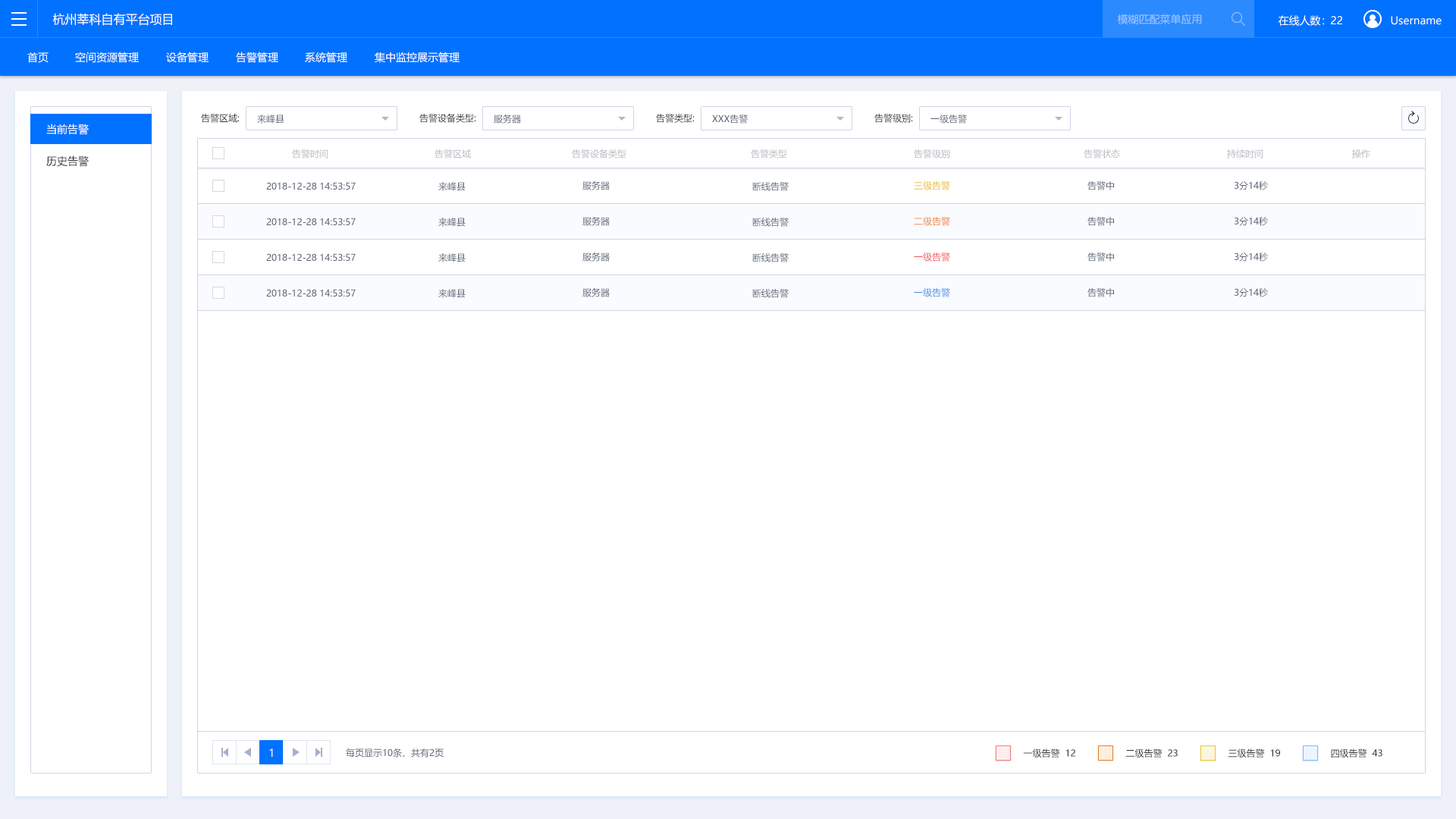
<style>
.page{position:relative;width:1456px;height:819px;background:#ffffff}
.page>*{position:absolute;margin:0}
.t1{font:12.1px "MicrosoftYaHei";color:#ffffff}
.t2{font:10.6px "MicrosoftYaHei";color:#9cc8ff}
.t3{font:10.6px "MicrosoftYaHei";color:#ffffff}
.t4{font:9.1px "MicrosoftYaHei";color:#333333}
.t5{font:9.1px "MicrosoftYaHei";color:#596477}
.t6{font:9.1px "MicrosoftYaHei"}
.t7{font:9.1px "MicrosoftYaHei";color:#b8bbc2}
.t8{font:10.6px "MicrosoftYaHei";color:#333333}
.t9{font:9.1px "MicrosoftYaHei";color:#efbb20}
.t10{font:9.1px "MicrosoftYaHei";color:#ec842f}
.t11{font:9.1px "MicrosoftYaHei";color:#f35151}
.t12{font:9.1px "MicrosoftYaHei";color:#3b8eeb}
.t13{font:10.6px "MicrosoftYaHei";color:#fefeff}
</style>
<div class="page">
<p class="t1" style="left:52px;top:13px;width:120px;height:13px">杭州莘科自有平台项目</p>
<p class="t2" style="left:1117px;top:14px;width:85px;height:11px">模糊匹配菜单应用</p>
<p class="t3" style="left:1278px;top:15px;width:46px;height:11px">在线人数：</p>
<p class="t3" style="left:1331px;top:16px;width:11px;height:8px">22</p>
<p class="t3" style="left:1391px;top:16px;width:51px;height:9px">Username</p>
<p class="t3" style="left:27px;top:52px;width:22px;height:11px">首页</p>
<p class="t3" style="left:75px;top:52px;width:64px;height:11px">空间资源管理</p>
<p class="t3" style="left:166px;top:52px;width:43px;height:11px">设备管理</p>
<p class="t3" style="left:236px;top:52px;width:42px;height:11px">告警管理</p>
<p class="t3" style="left:305px;top:52px;width:42px;height:11px">系统管理</p>
<p class="t3" style="left:375px;top:52px;width:85px;height:11px">集中监控展示管理</p>
<p class="t4" style="left:201px;top:114px;width:39px;height:9px">告警区域:</p>
<p class="t4" style="left:419px;top:113px;width:57px;height:10px">告警设备类型:</p>
<p class="t5" style="left:494px;top:114px;width:27px;height:10px">服务器</p>
<p class="t4" style="left:656px;top:114px;width:39px;height:9px">告警类型:</p>
<p class="t4" style="left:874px;top:114px;width:39px;height:9px">告警级别:</p>
<p class="t3" style="left:46px;top:124px;width:43px;height:11px">当前告警</p>
<p class="t5" style="left:257px;top:115px;width:27px;height:9px">来峰县</p>
<p class="t5" style="left:712px;top:115px;width:36px;height:9px">XXX告警</p>
<p class="t5" style="left:930px;top:115px;width:37px;height:9px">一级告警</p>
<p class="t6" style="left:292px;top:149px;width:36px;height:9px">告警时间</p>
<p class="t7" style="left:435px;top:149px;width:36px;height:9px">告警区域</p>
<p class="t7" style="left:572px;top:149px;width:54px;height:9px">告警设备类型</p>
<p class="t7" style="left:751px;top:149px;width:36px;height:9px">告警类型</p>
<p class="t7" style="left:914px;top:149px;width:36px;height:9px">告警级别</p>
<p class="t7" style="left:1084px;top:149px;width:36px;height:9px">告警状态</p>
<p class="t7" style="left:1227px;top:149px;width:36px;height:9px">持续时间</p>
<p class="t7" style="left:1352px;top:149px;width:18px;height:9px">操作</p>
<p class="t8" style="left:46px;top:155px;width:43px;height:12px">历史告警</p>
<p class="t5" style="left:266px;top:182px;width:90px;height:8px">2018-12-28 14:53:57</p>
<p class="t5" style="left:438px;top:182px;width:28px;height:9px">来峰县</p>
<p class="t5" style="left:582px;top:180px;width:28px;height:10px">服务器</p>
<p class="t5" style="left:752px;top:181px;width:37px;height:10px">断线告警</p>
<p class="t9" style="left:914px;top:181px;width:36px;height:9px">三级告警</p>
<p class="t5" style="left:1087px;top:181px;width:27px;height:9px">告警中</p>
<p class="t5" style="left:1234px;top:180px;width:34px;height:10px">3分14秒</p>
<p class="t5" style="left:266px;top:218px;width:90px;height:7px">2018-12-28 14:53:57</p>
<p class="t5" style="left:438px;top:218px;width:28px;height:9px">来峰县</p>
<p class="t5" style="left:582px;top:216px;width:28px;height:10px">服务器</p>
<p class="t5" style="left:752px;top:217px;width:37px;height:10px">断线告警</p>
<p class="t10" style="left:914px;top:217px;width:36px;height:9px">二级告警</p>
<p class="t5" style="left:1087px;top:217px;width:27px;height:9px">告警中</p>
<p class="t5" style="left:1234px;top:216px;width:34px;height:10px">3分14秒</p>
<p class="t5" style="left:266px;top:253px;width:90px;height:8px">2018-12-28 14:53:57</p>
<p class="t5" style="left:438px;top:253px;width:28px;height:9px">来峰县</p>
<p class="t5" style="left:582px;top:252px;width:28px;height:10px">服务器</p>
<p class="t5" style="left:752px;top:253px;width:37px;height:9px">断线告警</p>
<p class="t11" style="left:914px;top:253px;width:36px;height:9px">一级告警</p>
<p class="t5" style="left:1087px;top:253px;width:27px;height:9px">告警中</p>
<p class="t5" style="left:1234px;top:252px;width:34px;height:10px">3分14秒</p>
<p class="t5" style="left:266px;top:289px;width:90px;height:8px">2018-12-28 14:53:57</p>
<p class="t5" style="left:438px;top:289px;width:28px;height:9px">来峰县</p>
<p class="t5" style="left:582px;top:287px;width:28px;height:10px">服务器</p>
<p class="t5" style="left:752px;top:288px;width:37px;height:10px">断线告警</p>
<p class="t12" style="left:914px;top:288px;width:36px;height:9px">一级告警</p>
<p class="t5" style="left:1087px;top:288px;width:27px;height:9px">告警中</p>
<p class="t5" style="left:1234px;top:287px;width:34px;height:10px">3分14秒</p>
<p class="t13" style="left:269px;top:748px;width:4px;height:9px">1</p>
<p class="t5" style="left:346px;top:748px;width:98px;height:10px">每页显示10条，共有2页</p>
<p class="t4" style="left:1023px;top:748px;width:37px;height:10px">一级告警</p>
<p class="t4" style="left:1065px;top:749px;width:10px;height:8px">12</p>
<p class="t4" style="left:1125px;top:748px;width:38px;height:10px">二级告警</p>
<p class="t4" style="left:1168px;top:749px;width:10px;height:8px">23</p>
<p class="t4" style="left:1228px;top:748px;width:37px;height:10px">三级告警</p>
<p class="t4" style="left:1270px;top:749px;width:10px;height:8px">19</p>
<p class="t4" style="left:1331px;top:748px;width:36px;height:10px">四级告警</p>
<p class="t4" style="left:1372px;top:749px;width:10px;height:8px">43</p>
</div>
